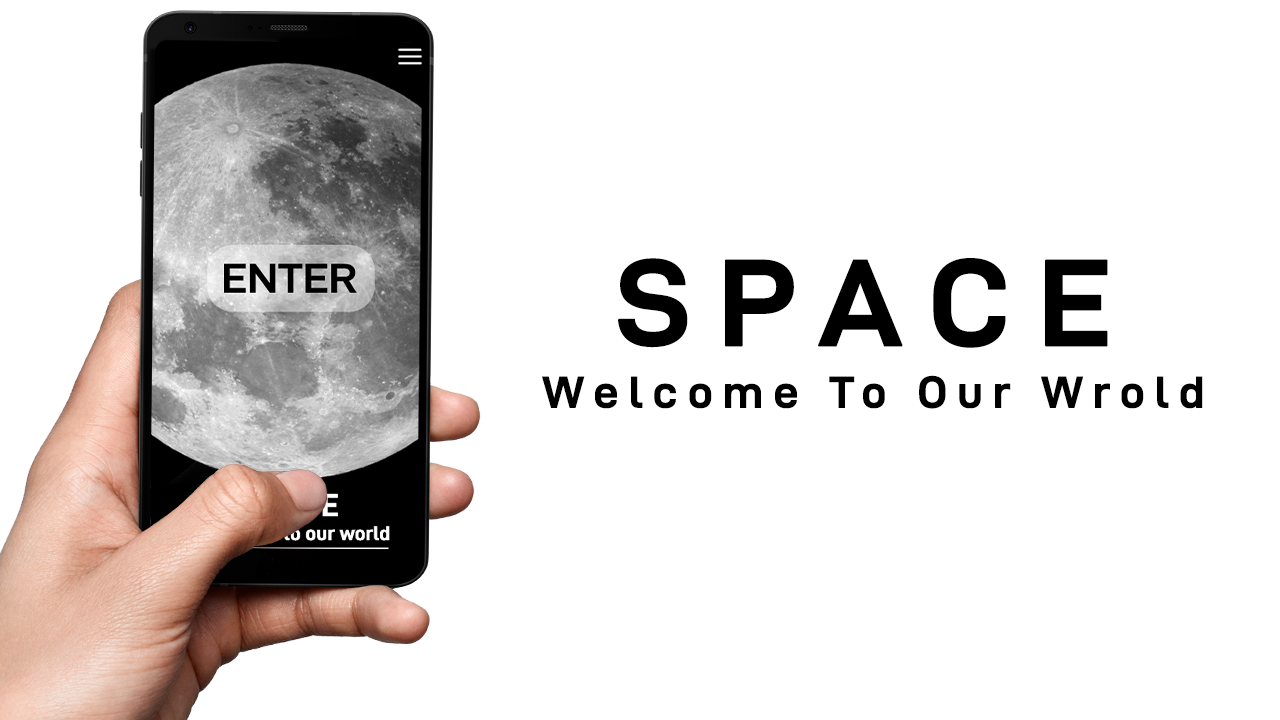
<style>
.page{position:relative;width:1280px;height:720px;background:#ffffff}
.page>*{position:absolute;margin:0}
.t1{font:123.6px "D-DINExp-Bold";letter-spacing:0.2em;color:#000000;font-weight:bold}
.t2{font:44.7px "D-DINExp-Bold";letter-spacing:0.2em;color:#000000;font-weight:bold}
</style>
<div class="page">
<p class="t1" style="left:618px;top:258px;width:490px;height:90px">SPACE</p>
<p class="t2" style="left:542px;top:375px;width:661px;height:34px">Welcome To Our Wrold</p>
</div>
